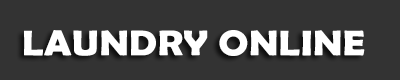
<style>
.page{position:relative;width:400px;height:80px;background:#333333}
.page>*{position:absolute;margin:0}
.t1{font:36px "BerlinSansFBDemi-Bold";letter-spacing:0.01em;color:#fefeff;scale:1.1 1}
</style>
<div class="page">
<p class="t1" style="left:24px;top:30px;width:341px;height:26px">LAUNDRY ONLINE</p>
</div>
